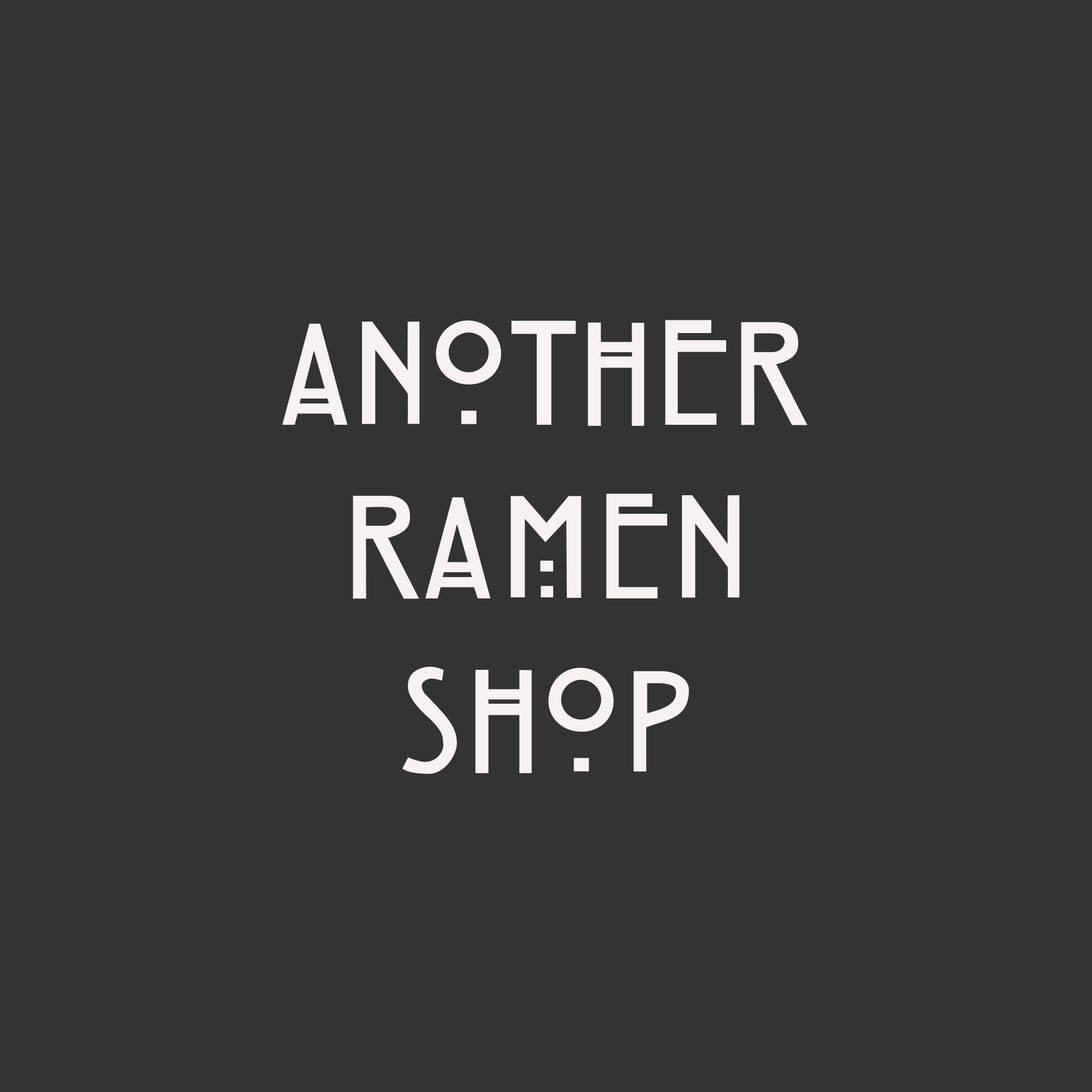
<style>
.page{position:relative;width:1092px;height:1092px;background:#333333}
.page>*{position:absolute;margin:0}
.t1{font:136.5px "HillHouse";letter-spacing:-0.025em;color:#f7f1f1}
</style>
<div class="page">
<p class="t1" style="left:282px;top:320px;width:526px;height:106px">Another</p>
<p class="t1" style="left:353px;top:494px;width:387px;height:105px">Ramen</p>
<p class="t1" style="left:402px;top:667px;width:287px;height:107px">Shop</p>
</div>
